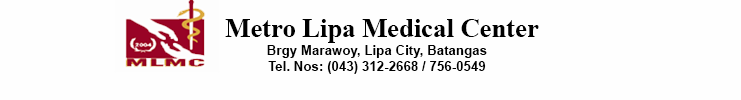
<style>
.page{position:relative;width:741px;height:100px;background:#fefefe}
.page>*{position:absolute;margin:0}
.t1{font:26.7px "TimesNewRomanPS-BoldMT";color:#000000}
.t2{font:13.3px "Arial-BoldMT";color:#000000}
</style>
<div class="page">
<p class="t1" style="left:225px;top:19px;width:314px;height:24px">Metro Lipa Medical Center</p>
<p class="t2" style="left:267px;top:45px;width:220px;height:13px">Brgy Marawoy, Lipa City, Batangas</p>
<p class="t2" style="left:268px;top:61px;width:218px;height:13px">Tel. Nos: (043) 312-2668 / 756-0549</p>
</div>
